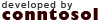
<style>
.page{position:relative;width:100px;height:24px;background:#ffffff}
.page>*{position:absolute;margin:0}
.t1{font:10px "ArialMT";letter-spacing:0.1em;color:#333333}
.t2{font:16.7px "Herald";letter-spacing:0.1em;color:#330000}
</style>
<div class="page">
<p class="t1" style="left:2px;top:1px;width:71px;height:9px">developed by</p>
<p class="t2" style="left:2px;top:8px;width:96px;height:12px">conntosol</p>
</div>
